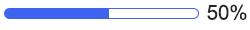
<style>
.page{position:relative;width:250px;height:30px;background:#ffffff}
.page>*{position:absolute;margin:0}
.t1{font:20.4px "ArialMT";color:#262627}
</style>
<div class="page">
<p class="t1" style="left:207px;top:4px;width:40px;height:17px">50%</p>
</div>
